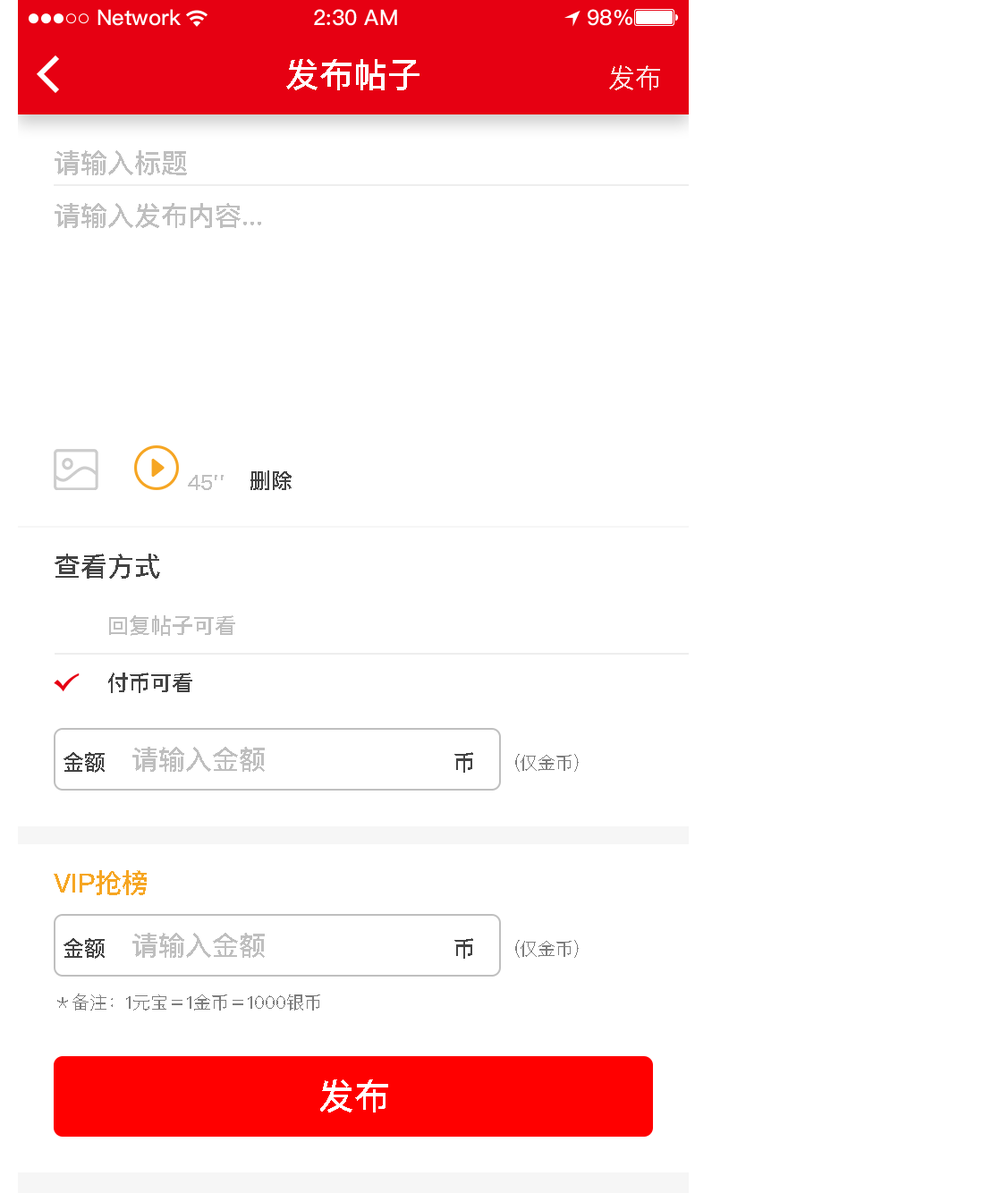
<style>
.page{position:relative;width:1000px;height:1193px;background:#ffffff}
.page>*{position:absolute;margin:0}
.t1{font:34px "PingFangSC-Medium";color:#ffffff;text-transform:uppercase}
.t2{font:26.8px "PingFangSC-Regular";color:#faddde;text-transform:uppercase}
.t3{font:26.8px "PingFangSC-Medium";color:#bfbfbf;text-transform:uppercase}
.t4{font:21.5px "PingFangSC-Medium";color:#434343;text-transform:uppercase}
.t5{font:21.5px "PingFangSC-Medium";color:#bfbfbf;text-transform:uppercase}
.t6{font:26.8px "PingFangSC-Medium";color:#434343;text-transform:uppercase}
.t7{font:17.9px "PingFangSC-Regular";color:#7d7d7d;text-transform:uppercase}
.t8{font:26.8px "PingFangSC-Medium";color:#f6a623;text-transform:uppercase}
.t9{font:35.8px "PingFangSC-Medium";color:#ffffff;text-transform:uppercase}
</style>
<div class="page">
<p class="t1" style="left:286px;top:59px;width:133px;height:31px">发布帖子</p>
<p class="t2" style="left:609px;top:65px;width:51px;height:25px">发布</p>
<p class="t3" style="left:55px;top:150px;width:132px;height:25px">请输入标题</p>
<p class="t3" style="left:55px;top:203px;width:206px;height:25px">请输入发布内容...</p>
<p class="t4" style="left:250px;top:470px;width:41px;height:20px">删除</p>
<p class="t5" style="left:188px;top:475px;width:36px;height:15px">45''</p>
<p class="t6" style="left:55px;top:553px;width:105px;height:26px">查看方式</p>
<p class="t5" style="left:109px;top:615px;width:126px;height:21px">回复帖子可看</p>
<p class="t4" style="left:108px;top:672px;width:84px;height:21px">付币可看</p>
<p class="t3" style="left:132px;top:747px;width:133px;height:25px">请输入金额</p>
<p class="t4" style="left:63px;top:752px;width:42px;height:21px">金额</p>
<p class="t4" style="left:454px;top:752px;width:19px;height:21px">币</p>
<p class="t7" style="left:515px;top:754px;width:64px;height:18px">(仅金币)</p>
<p class="t8" style="left:54px;top:870px;width:93px;height:25px">vip抢榜</p>
<p class="t4" style="left:63px;top:938px;width:42px;height:21px">金额</p>
<p class="t3" style="left:132px;top:933px;width:133px;height:25px">请输入金额</p>
<p class="t4" style="left:454px;top:938px;width:19px;height:21px">币</p>
<p class="t7" style="left:515px;top:940px;width:64px;height:18px">(仅金币)</p>
<p class="t7" style="left:57px;top:993px;width:263px;height:17px">＊备注：1元宝＝1金币＝1000银币</p>
<p class="t9" style="left:320px;top:1079px;width:68px;height:33px">发布</p>
</div>
